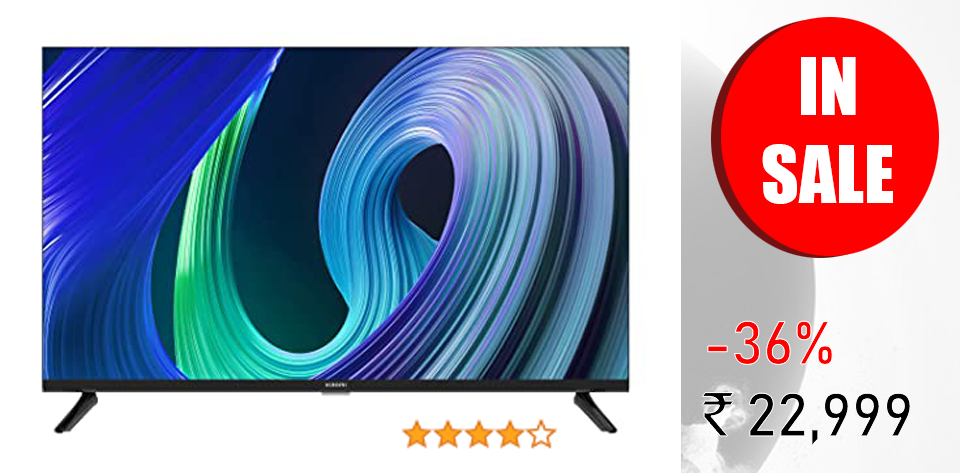
<style>
.page{position:relative;width:960px;height:473px;background:#ffffff}
.page>*{position:absolute;margin:0}
.t1{font:73.2px "Impact";color:#ffffff;text-transform:uppercase}
.t2{font:59.8px "Bahnschrift";color:#000000;text-transform:uppercase}
.t3{font:59.8px "Bahnschrift";color:#ff0000;text-transform:uppercase}
.t4{font:59.8px "IndianRupee-Regular";color:#000000;text-transform:uppercase}
</style>
<div class="page">
<p class="t1" style="left:762px;top:57px;width:131px;height:147px;text-align:center">in<br>sale</p>
<p class="t2" style="left:702px;top:321px;width:209px;height:125px"><span class="t3">-36%<br></span><span class="t4">`</span>22,999</p>
</div>
